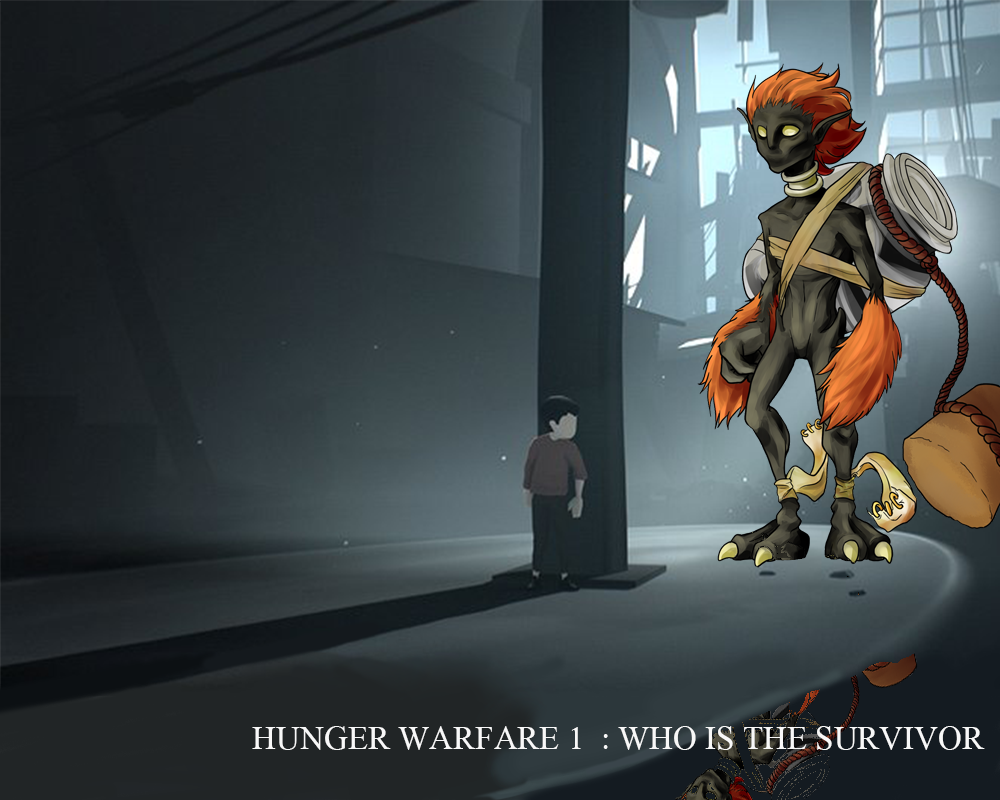
<style>
.page{position:relative;width:1000px;height:800px}
.page>*{position:absolute;margin:0}
.t1{font:50px "AngsanaNew";color:#f8f8f8}
</style>
<div class="page">
<p class="t1" style="left:252px;top:726px;width:733px;height:24px">HUNGER WARFARE 1  : WHO IS THE SURVIVOR</p>
</div>
